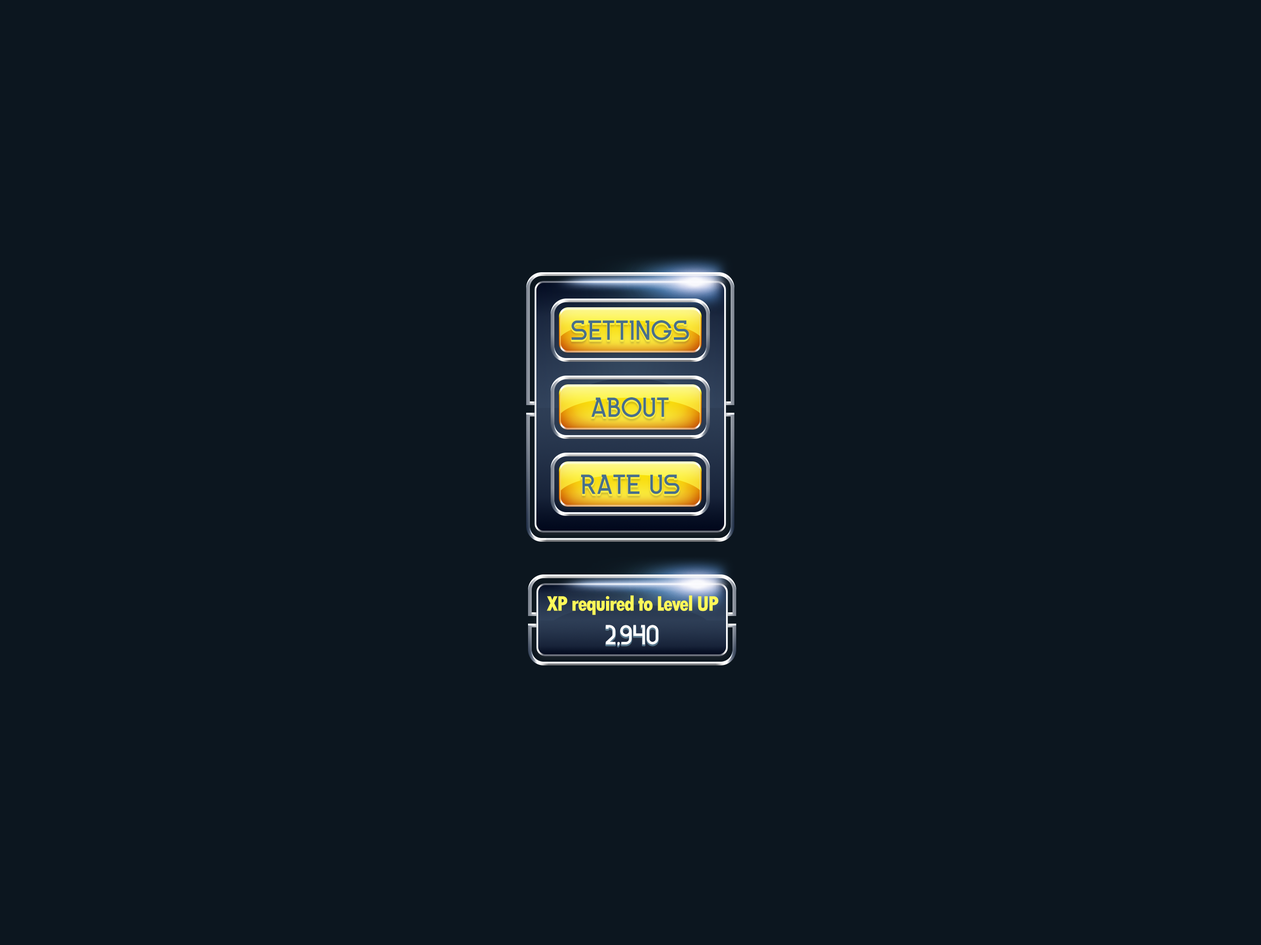
<style>
.page{position:relative;width:1261px;height:945px;background:#0c161f}
.page>*{position:absolute;margin:0}
.t1{font:27.7px "INKFERNO";color:#476f8b;text-transform:uppercase}
.t2{font:22.2px "TwCenMT-CondensedExtraBold";letter-spacing:-0.05em;color:#fef859}
.t3{font:27.7px "INKFERNO";color:#ffffff;text-transform:uppercase}
</style>
<div class="page">
<p class="t1" style="left:572px;top:320px;width:117px;height:20px">Settings</p>
<p class="t1" style="left:591px;top:397px;width:78px;height:20px">About</p>
<p class="t1" style="left:581px;top:475px;width:99px;height:19px">Rate Us</p>
<p class="t2" style="left:547px;top:596px;width:172px;height:19px">XP required to Level UP</p>
<p class="t3" style="left:606px;top:625px;width:53px;height:21px">2,940</p>
</div>
